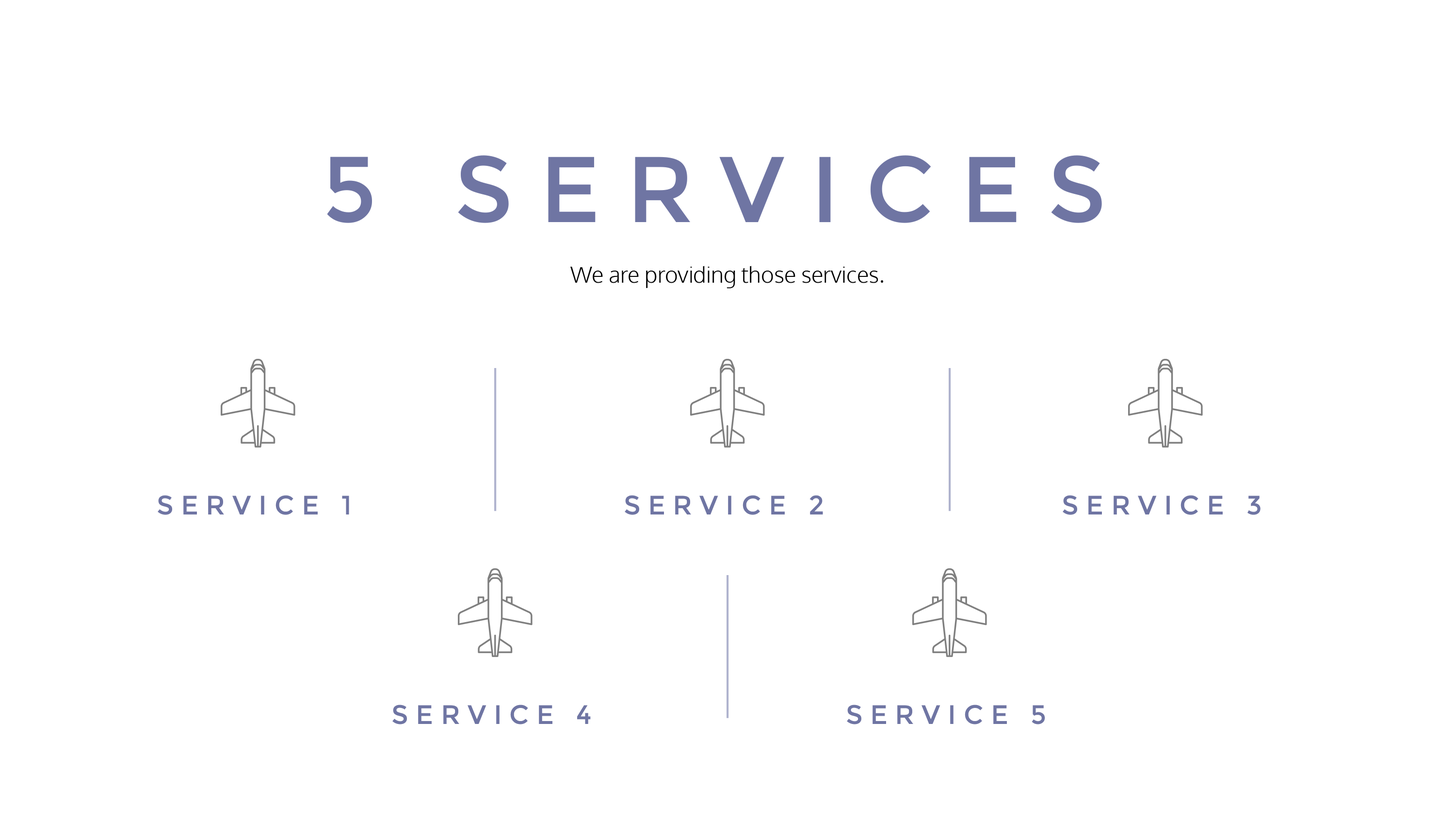
<style>
.page{position:relative;width:1455px;height:819px;background:#ffffff}
.page>*{position:absolute;margin:0}
.t1{font:93.2px "Montserrat-Regular";letter-spacing:0.28em;color:#6f75a3}
.t2{font:22.2px "Oxygen-Light";color:#000000}
.t3{font:26.7px "Montserrat-Regular";letter-spacing:0.28em;color:#6f75a3}
</style>
<div class="page">
<p class="t1" style="left:327px;top:155px;width:775px;height:68px">5 SERVICES</p>
<p class="t2" style="left:570px;top:266px;width:313px;height:23px">We are providing those services.</p>
<p class="t3" style="left:158px;top:495px;width:191px;height:20px">SERVICE 1</p>
<p class="t3" style="left:625px;top:495px;width:198px;height:20px">SERVICE 2</p>
<p class="t3" style="left:1063px;top:495px;width:198px;height:20px">SERVICE 3</p>
<p class="t3" style="left:392px;top:705px;width:199px;height:20px">SERVICE 4</p>
<p class="t3" style="left:847px;top:705px;width:198px;height:20px">SERVICE 5</p>
</div>
